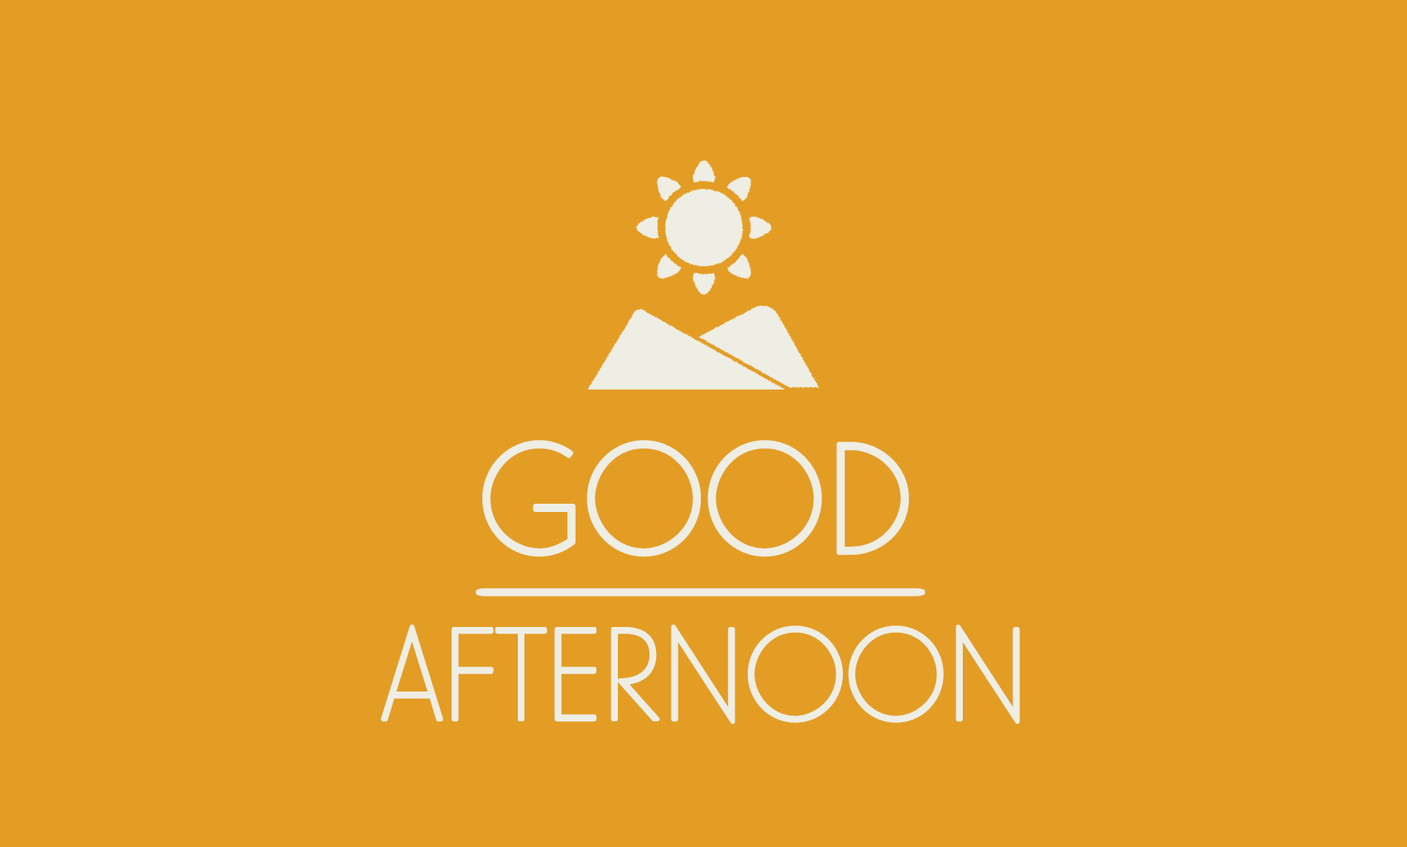
<style>
.page{position:relative;width:1407px;height:847px;background:#e39d24}
.page>*{position:absolute;margin:0}
.t1{font:169.9px "ElegantLux-Mager";letter-spacing:-0.053em;color:#eeeee4}
.t2{font:168px "ElegantLux-Mager";letter-spacing:-0.053em;color:#eeeee4}
.t3{font:675.1px "ElegantLux-Mager";letter-spacing:-0.053em;color:#eeeee4;scale:0.25 1}
.t4{font:141.8px "ElegantLux-Mager";letter-spacing:-0.053em;color:#eeeee4}
</style>
<div class="page">
<p class="t1" style="left:482px;top:440px;width:427px;height:117px">GOOD</p>
<p class="t2" style="left:486px;top:441px;width:422px;height:115px">GOOD</p>
<p class="t3" style="left:476px;top:588px;width:450px;height:9px;rotate:90deg">I</p>
<p class="t4" style="left:381px;top:625px;width:639px;height:100px">AFTERNOON</p>
</div>
